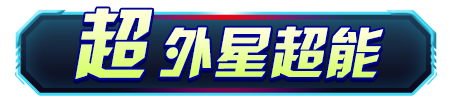
<style>
.page{position:relative;width:457px;height:108px;background:#ffffff}
.page>*{position:absolute;margin:0}
.t1{font:76px "HYk2gj";font-style:italic}
.t2{font:55px "HYk2gj";font-style:italic}
</style>
<div class="page">
<p class="t1" style="left:75px;top:8px;width:78px;height:71px">超</p>
<p class="t2" style="left:159px;top:26px;width:225px;height:53px">外星超能</p>
</div>
